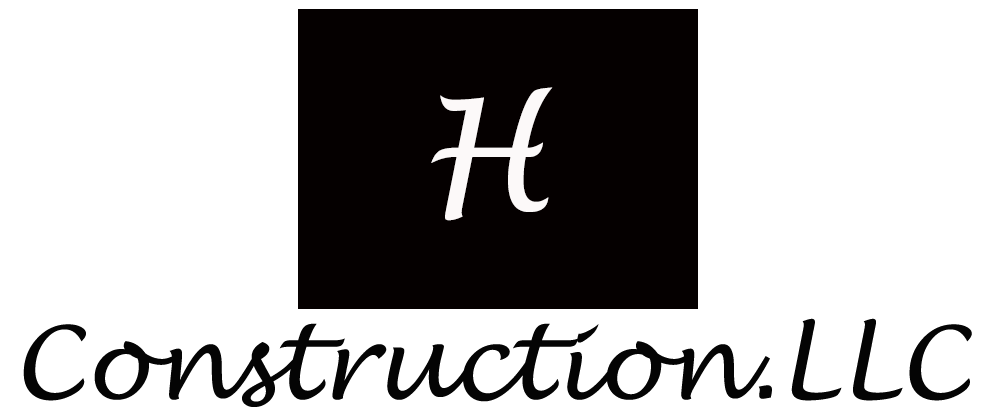
<style>
.page{position:relative;width:1000px;height:410px;background:#ffffff}
.page>*{position:absolute;margin:0}
.t1{font:150px "LucidaHandwriting-Italic";color:#fcf9f9}
.t2{font:100px "LucidaHandwriting-Italic";color:#040404}
</style>
<div class="page">
<p class="t1" style="left:431px;top:87px;width:122px;height:134px">H</p>
<p class="t2" style="left:23px;top:318px;width:949px;height:89px">Construction.LLC</p>
</div>
